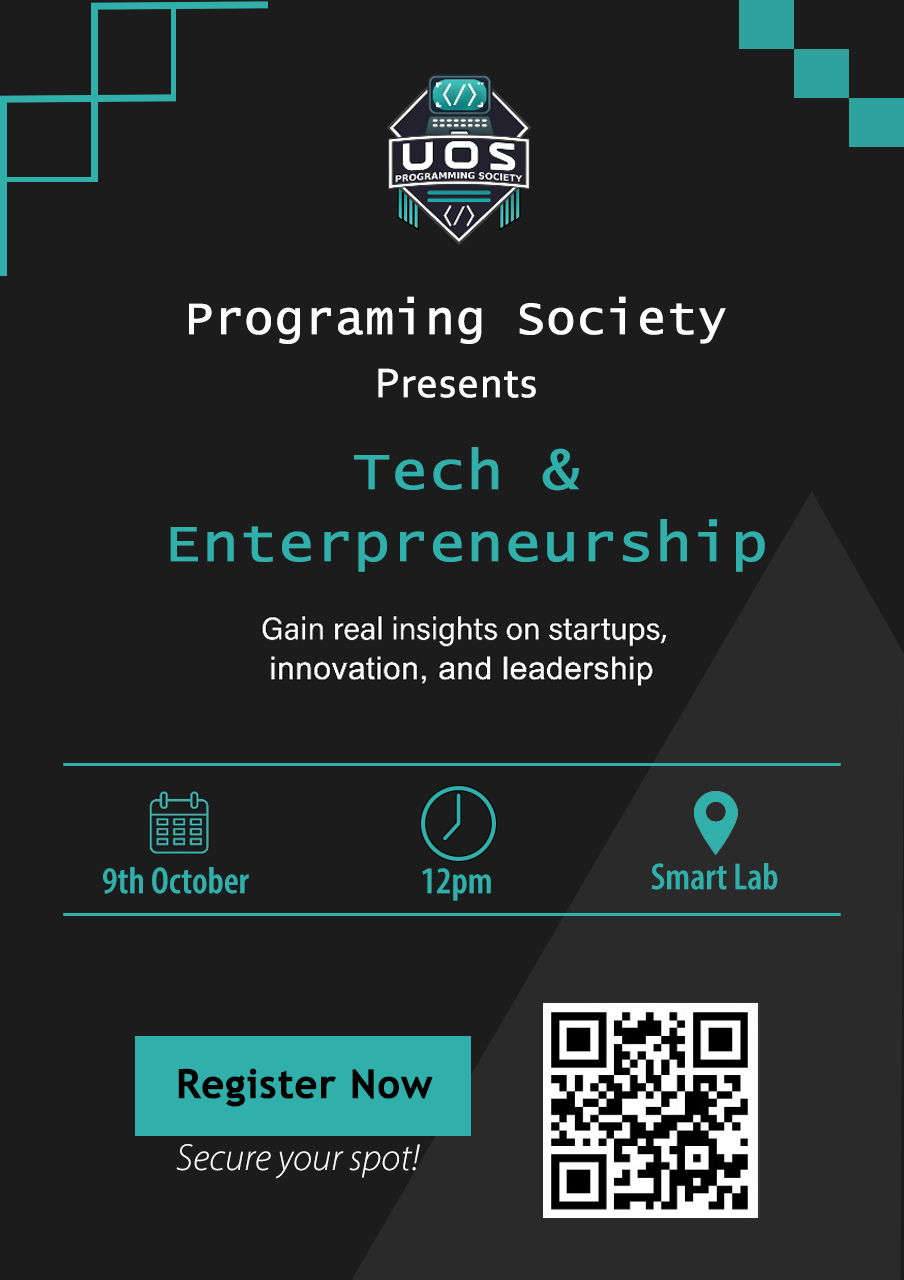
<style>
.page{position:relative;width:904px;height:1280px;background:#1c1c1c}
.page>*{position:absolute;margin:0}
.t1{font:48px "LucidaConsole";color:#ffffff;font-weight:bold}
.t2{font:43px "Corbel";color:#ffffff;font-weight:bold}
.t3{font:54px "LucidaConsole";color:#31afab;font-weight:bold;scale:1.11 1}
.t4{font:38px "MyriadConceptRoman-SemiboldCondensed";color:#31afab;font-weight:bold}
.t5{font:39.9px "TrebuchetMS-Bold";color:#000000;font-weight:bold}
.t6{font:38px "MyriadConceptItalic-LightItalic";color:#ffffff;font-weight:bold}
</style>
<div class="page">
<p class="t1" style="left:189px;top:296px;width:537px;height:48px">Programing Society</p>
<p class="t2" style="left:378px;top:368px;width:158px;height:30px">Presents</p>
<p class="t3" style="left:170px;top:447px;width:595px;height:125px;text-align:center">Tech &amp;<br>Enterpreneurship</p>
<p class="t4" style="left:103px;top:867px;width:146px;height:27px">9th October</p>
<p class="t4" style="left:422px;top:868px;width:69px;height:33px">12pm</p>
<p class="t4" style="left:651px;top:863px;width:127px;height:27px">Smart Lab</p>
<p class="t5" style="left:178px;top:1068px;width:255px;height:39px">Register Now</p>
<p class="t6" style="left:176px;top:1144px;width:244px;height:35px">Secure your spot!</p>
</div>
